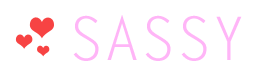
<style>
.page{position:relative;width:272px;height:74px;background:#ffffff}
.page>*{position:absolute;margin:0}
.t1{font:60px "LetterGothicStd";color:#ffb5f7}
</style>
<div class="page">
<p class="t1" style="left:73px;top:15px;width:169px;height:46px">SASSY</p>
</div>
